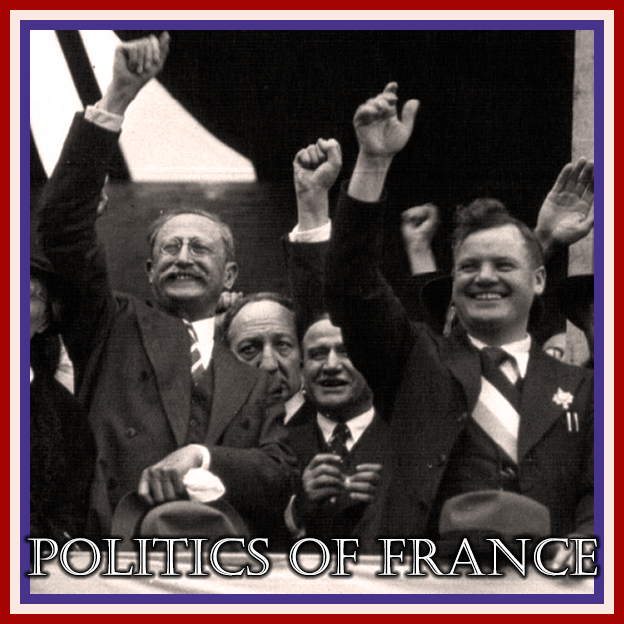
<style>
.page{position:relative;width:624px;height:624px}
.page>*{position:absolute;margin:0}
.t1{font:50px "Castellar";color:#ffffff}
</style>
<div class="page">
<p class="t1" style="left:27px;top:538px;width:570px;height:38px">Politics of France</p>
</div>
